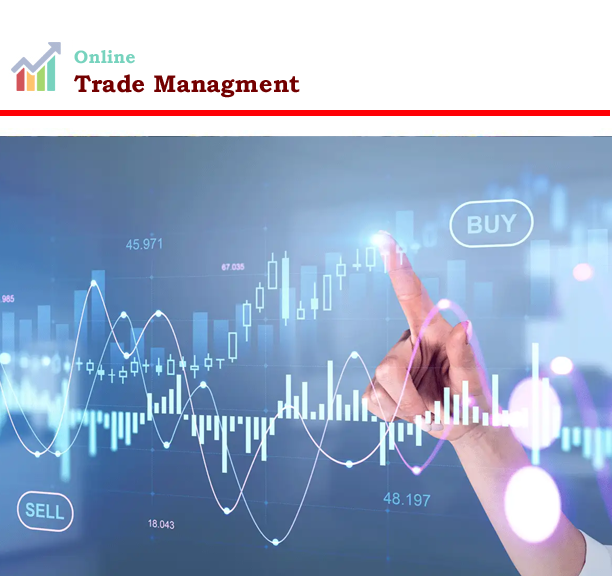
<style>
.page{position:relative;width:612px;height:576px;background:#ffffff}
.page>*{position:absolute;margin:0}
.t1{font:24.1px "BookmanOldStyle-Bold";color:#730000}
.t2{font:18px "BookmanOldStyle-Bold";color:#77d3be}
</style>
<div class="page">
<p class="t1" style="left:74px;top:50px;width:226px;height:48px"><span class="t2">Online<br></span>Trade Managment</p>
</div>
